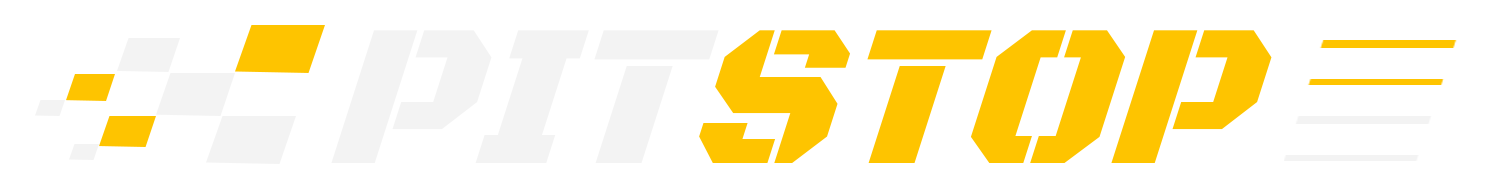
<style>
.page{position:relative;width:1499px;height:190px;background:#ffffff}
.page>*{position:absolute;margin:0}
.t1{font:206.7px "BlackOpsOne-Regular";color:#fec400;text-transform:uppercase;font-style:italic}
.t2{font:206.7px "BlackOpsOne-Regular";color:#f3f3f3;text-transform:uppercase;font-style:italic}
</style>
<div class="page">
<p class="t1" style="left:331px;top:30px;width:941px;height:133px"><span class="t2">PIT</span>STOP</p>
</div>
